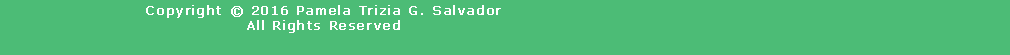
<style>
.page{position:relative;width:1010px;height:55px;background:#4cbc76}
.page>*{position:absolute;margin:0}
.t1{font:12.5px "Verdana";letter-spacing:0.05em;color:#ffffff;font-weight:bold}
</style>
<div class="page">
<p class="t1" style="left:146px;top:5px;width:355px;height:28px;text-align:center">Copyright © 2016 Pamela Trizia G. Salvador<br>All Rights Reserved</p>
</div>
